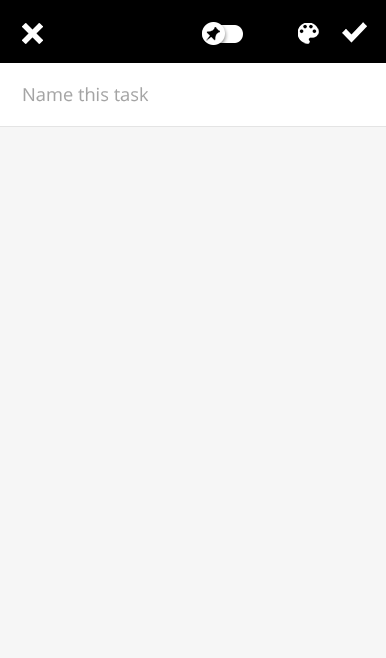
<style>
.page{position:relative;width:386px;height:658px;background:#f6f6f6}
.page>*{position:absolute;margin:0}
.t1{font:18px "OpenSans";color:#a4a4a4}
</style>
<div class="page">
<p class="t1" style="left:23px;top:87px;width:126px;height:15px">Name this task</p>
</div>
